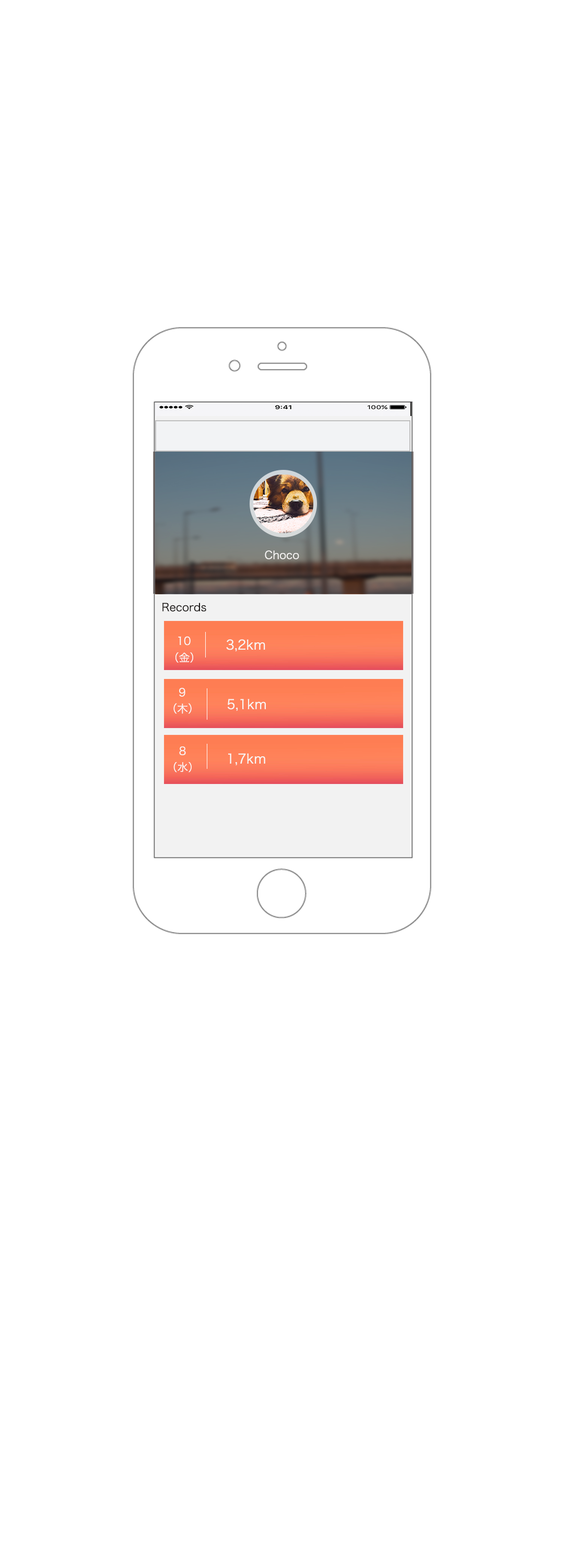
<style>
.page{position:relative;width:564px;height:1568px;background:#ffffff}
.page>*{position:absolute;margin:0}
.t1{font:10.9px "HiraKakuProN-W3";color:#f8f6f5}
.t2{font:10.9px "HiraKakuProN-W3";color:#1d1918}
.t3{font:10.9px "HiraKakuProN-W3";color:#faf6f5}
.t4{font:13.1px "HiraKakuProN-W3";color:#f8f6f5}
</style>
<div class="page">
<p class="t1" style="left:265px;top:550px;width:34px;height:9px">Choco</p>
<p class="t2" style="left:163px;top:603px;width:43px;height:9px">Records</p>
<p class="t3" style="left:178px;top:636px;width:13px;height:9px">10</p>
<p class="t4" style="left:226px;top:639px;width:40px;height:13px">3,2km</p>
<p class="t3" style="left:176px;top:652px;width:17px;height:11px">（金）</p>
<p class="t3" style="left:179px;top:688px;width:7px;height:9px">９</p>
<p class="t4" style="left:227px;top:699px;width:40px;height:12px">5,1km</p>
<p class="t3" style="left:174px;top:703px;width:18px;height:11px">（木）</p>
<p class="t3" style="left:179px;top:746px;width:7px;height:9px">８</p>
<p class="t4" style="left:228px;top:753px;width:38px;height:13px">1,7km</p>
<p class="t3" style="left:174px;top:762px;width:18px;height:11px">（水）</p>
</div>
